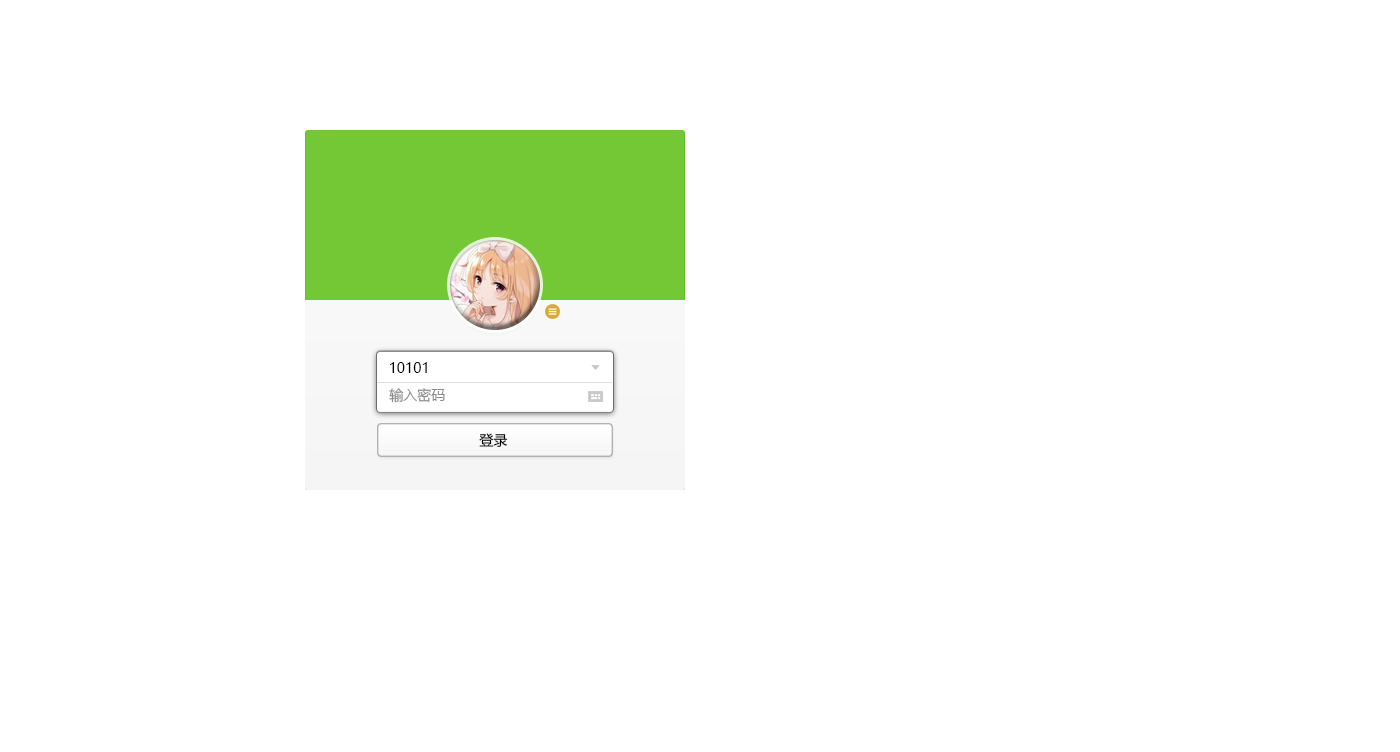
<style>
.page{position:relative;width:1400px;height:752px;background:#ffffff}
.page>*{position:absolute;margin:0}
.t1{font:14px "MicrosoftYaHei";color:#000000}
.t2{font:14px "MicrosoftYaHei";color:#8b8b8b}
</style>
<div class="page">
<p class="t1" style="left:390px;top:362px;width:37px;height:11px">10101</p>
<p class="t2" style="left:389px;top:388px;width:56px;height:15px">输入密码</p>
<p class="t1" style="left:479px;top:433px;width:29px;height:14px">登录</p>
</div>
